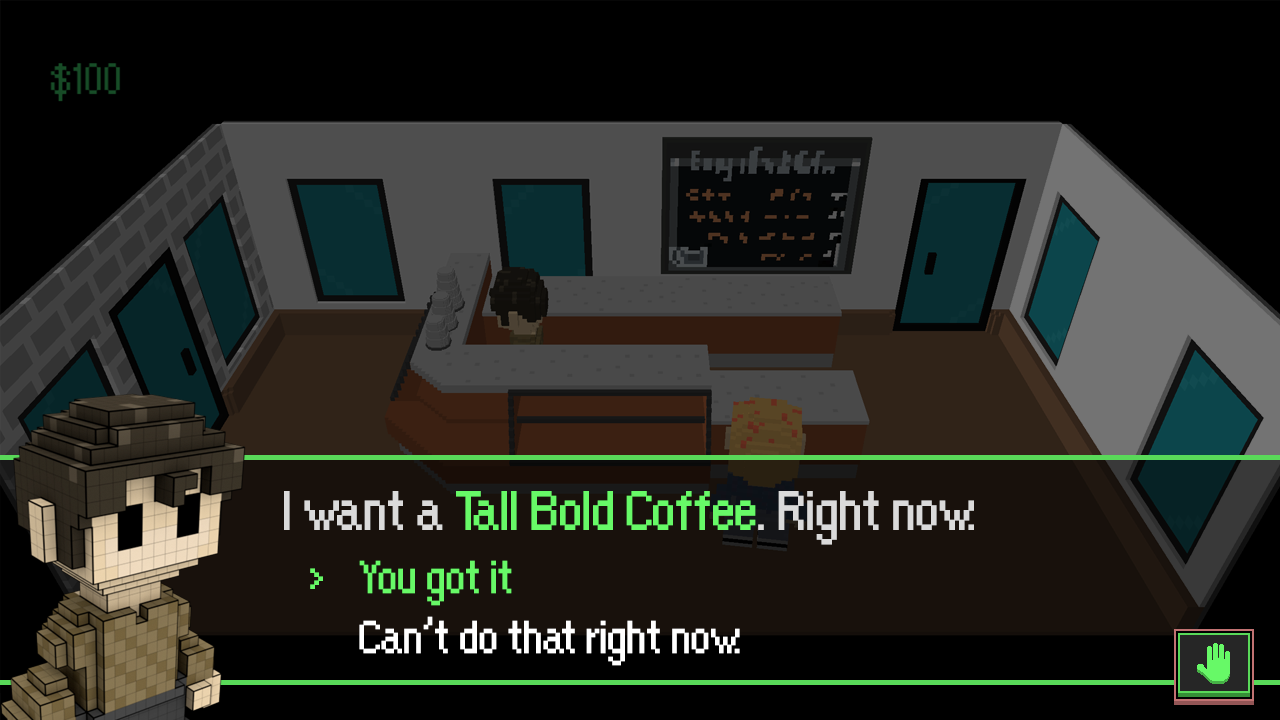
<style>
.page{position:relative;width:1280px;height:720px;background:#000000}
.page>*{position:absolute;margin:0}
.t1{font:60px "OrangeKid";letter-spacing:-0.01em;color:#67f967}
.t2{font:60px "OrangeKid";letter-spacing:-0.01em;color:#dadada}
.t3{font:50px "OrangeKid";letter-spacing:-0.01em;color:#67f967}
.t4{font:50px/60px "OrangeKid";letter-spacing:-0.01em;color:#ffffff}
.t5{font:50px/60px "OrangeKid";letter-spacing:-0.01em;color:#67f967}
</style>
<div class="page">
<p class="t1" style="left:284px;top:491px;width:690px;height:54px"><span class="t2">I want a </span>Tall Bold Coffee<span class="t2">. Right now.</span></p>
<p class="t3" style="left:310px;top:568px;width:13px;height:21px">&lt;</p>
<p class="t4" style="left:359px;top:560px;width:381px;height:106px"><span class="t5">You got it<br></span>Can’t do that right now.</p>
</div>
